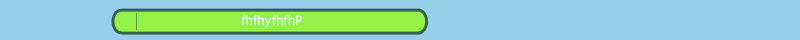
<style>
.page{position:relative;width:800px;height:40px;background:#96cfe9}
.page>*{position:absolute;margin:0}
.t1{font:12px "Verdana";letter-spacing:-0.01em;color:#ffffff}
</style>
<div class="page">
<p class="t1" style="left:241px;top:15px;width:61px;height:12px">fhfhyfhfhP</p>
</div>
